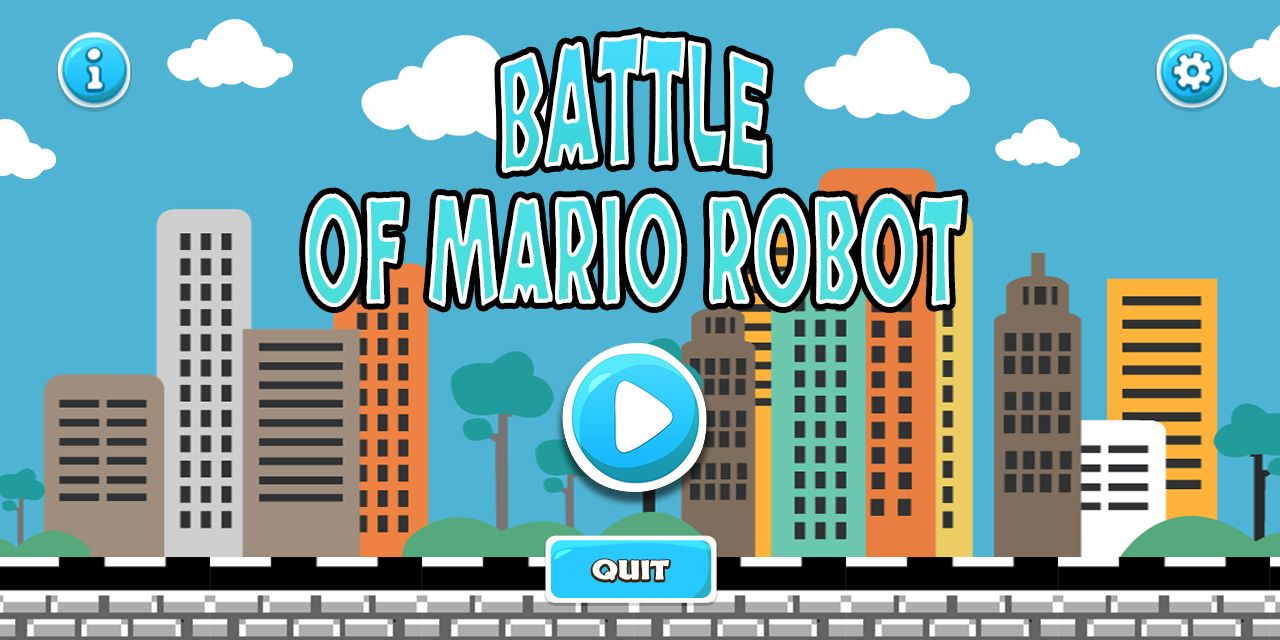
<style>
.page{position:relative;width:1280px;height:640px;background:#4fb4d3}
.page>*{position:absolute;margin:0}
.t1{font:145.5px "Skranji-Bold";letter-spacing:0.01em;scale:0.46 1}
.t2{font:25.8px "Skranji-Bold";letter-spacing:-0.02em;color:#ffffff;scale:1.15 1}
</style>
<div class="page">
<p class="t1" style="left:500px;top:32px;width:268px;height:142px">BATTLE</p>
<p class="t1" style="left:305px;top:193px;width:658px;height:114px">OF MARIO ROBOT</p>
<p class="t2" style="left:592px;top:559px;width:77px;height:22px">QUIT</p>
</div>
